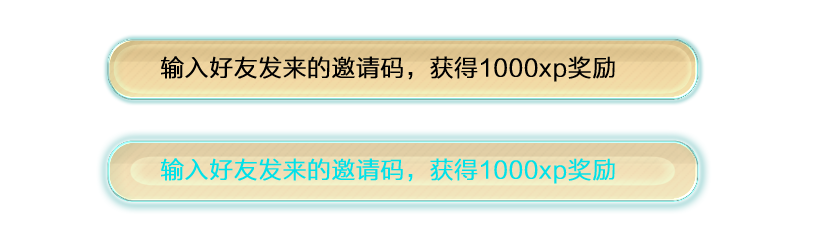
<style>
.page{position:relative;width:827px;height:237px;background:#ffffff}
.page>*{position:absolute;margin:0}
.t1{font:23.8px "FZLTXHK--GBK1-0";color:#000000;font-weight:bold}
.t2{font:23.8px "FZLTXHK--GBK1-0";color:#00e1e9;font-weight:bold}
</style>
<div class="page">
<p class="t1" style="left:161px;top:56px;width:454px;height:26px">输入好友发来的邀请码，获得1000xp奖励</p>
<p class="t2" style="left:161px;top:158px;width:454px;height:26px">输入好友发来的邀请码，获得1000xp奖励</p>
</div>
